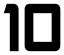
<style>
.page{position:relative;width:64px;height:55px;background:#ffffff}
.page>*{position:absolute;margin:0}
.t1{font:65px "Akashi";color:#000000;scale:0.94 1}
</style>
<div class="page">
<p class="t1" style="left:3px;top:3px;width:58px;height:49px">10</p>
</div>
